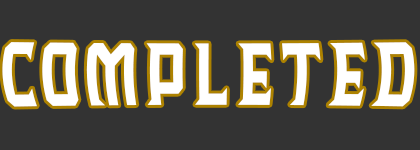
<style>
.page{position:relative;width:420px;height:150px;background:#333333}
.page>*{position:absolute;margin:0}
.t1{font:93.8px "Lorde-Havana";letter-spacing:0.1em;color:#ffffff;scale:0.75 1}
</style>
<div class="page">
<p class="t1" style="left:2px;top:42px;width:413px;height:65px">COMPLETED</p>
</div>
